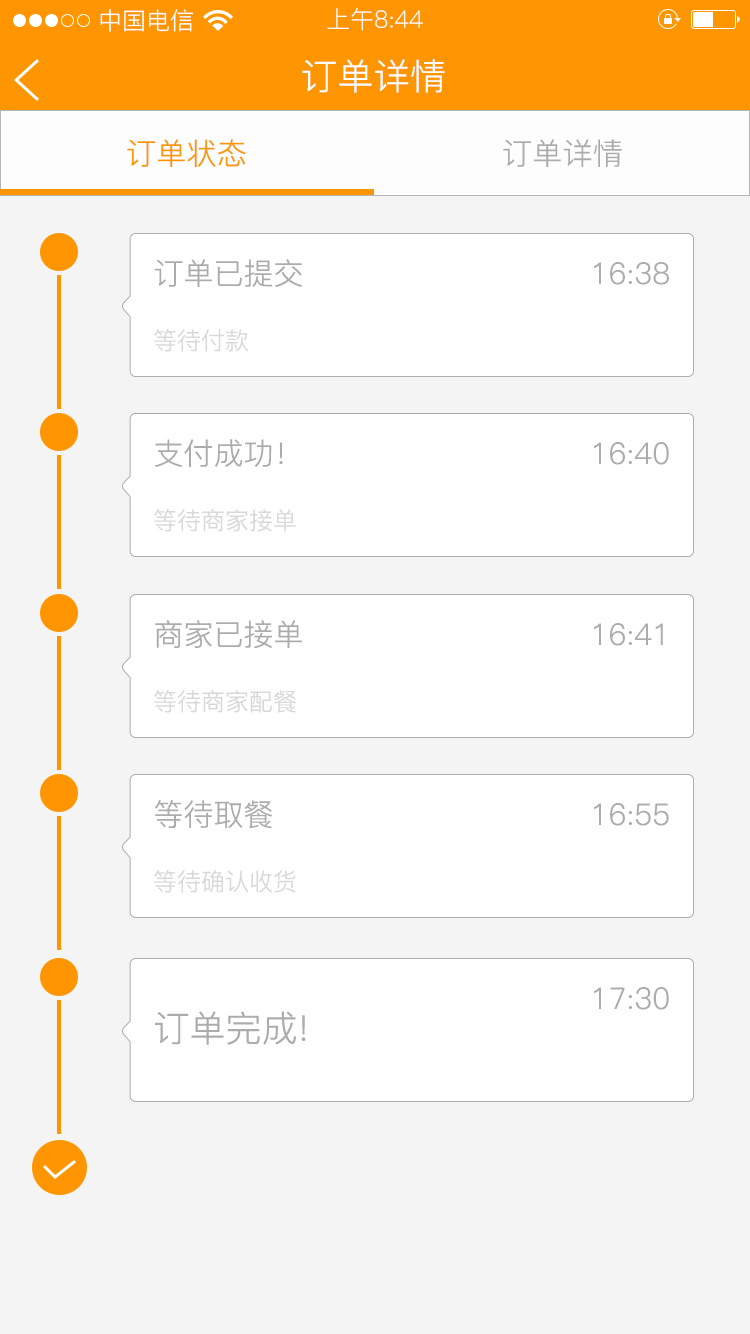
<style>
.page{position:relative;width:750px;height:1334px;background:#f4f4f4}
.page>*{position:absolute;margin:0}
.t1{font:24px "PingFang-SC-Regular";color:#ffffff}
.t2{font:36px "PingFang-SC-Regular";letter-spacing:0.01em;color:#ffffff}
.t3{font:30px "PingFang-SC-Regular";letter-spacing:0.01em;color:#ff9500}
.t4{font:30px "PingFang-SC-Regular";letter-spacing:0.01em;color:#acacac}
.t5{font:30px "PingFang-SC-Regular";color:#acacac}
.t6{font:24px "PingFang-SC-Regular";color:#d8d8db}
.t7{font:36px "PingFang-SC-Regular";color:#acacac}
</style>
<div class="page">
<p class="t1" style="left:100px;top:9px;width:94px;height:23px">中国电信</p>
<p class="t1" style="left:327px;top:8px;width:96px;height:23px">上午8:44</p>
<p class="t2" style="left:302px;top:59px;width:143px;height:34px">订单详情</p>
<p class="t3" style="left:127px;top:139px;width:119px;height:28px">订单状态</p>
<p class="t4" style="left:503px;top:139px;width:119px;height:28px">订单详情</p>
<p class="t5" style="left:154px;top:259px;width:148px;height:28px">订单已提交</p>
<p class="t5" style="left:594px;top:262px;width:75px;height:23px">16:38</p>
<p class="t6" style="left:154px;top:329px;width:94px;height:23px">等待付款</p>
<p class="t5" style="left:155px;top:439px;width:128px;height:28px">支付成功！</p>
<p class="t5" style="left:594px;top:442px;width:75px;height:23px">16:40</p>
<p class="t6" style="left:154px;top:509px;width:142px;height:23px">等待商家接单</p>
<p class="t5" style="left:155px;top:620px;width:147px;height:29px">商家已接单</p>
<p class="t5" style="left:594px;top:623px;width:69px;height:23px">16:41</p>
<p class="t6" style="left:154px;top:690px;width:142px;height:23px">等待商家配餐</p>
<p class="t5" style="left:155px;top:800px;width:118px;height:29px">等待取餐</p>
<p class="t5" style="left:594px;top:803px;width:75px;height:23px">16:55</p>
<p class="t6" style="left:154px;top:870px;width:142px;height:23px">等待确认收货</p>
<p class="t5" style="left:594px;top:987px;width:75px;height:23px">17:30</p>
<p class="t7" style="left:155px;top:1011px;width:151px;height:34px">订单完成!</p>
</div>
